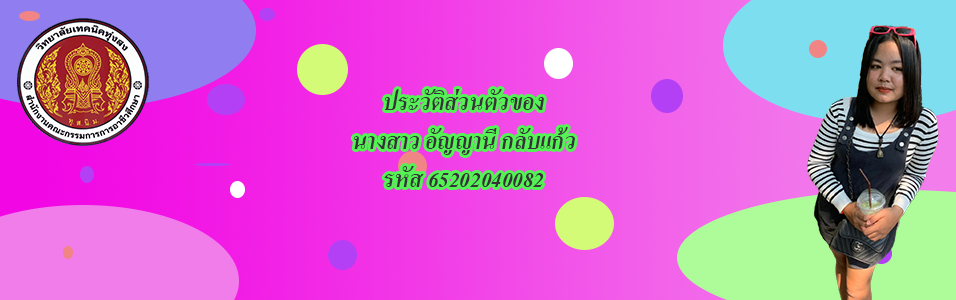
<style>
.page{position:relative;width:956px;height:300px}
.page>*{position:absolute;margin:0}
.t1{font:32px "AngsanaNew-BoldItalic";color:#393139}
</style>
<div class="page">
<p class="t1" style="left:353px;top:89px;width:222px;height:98px;text-align:center">ประวัติส่วนตัวของ<br>นางสาว อัญญานี กลับแก้ว<br>รหัส 65202040082</p>
</div>
